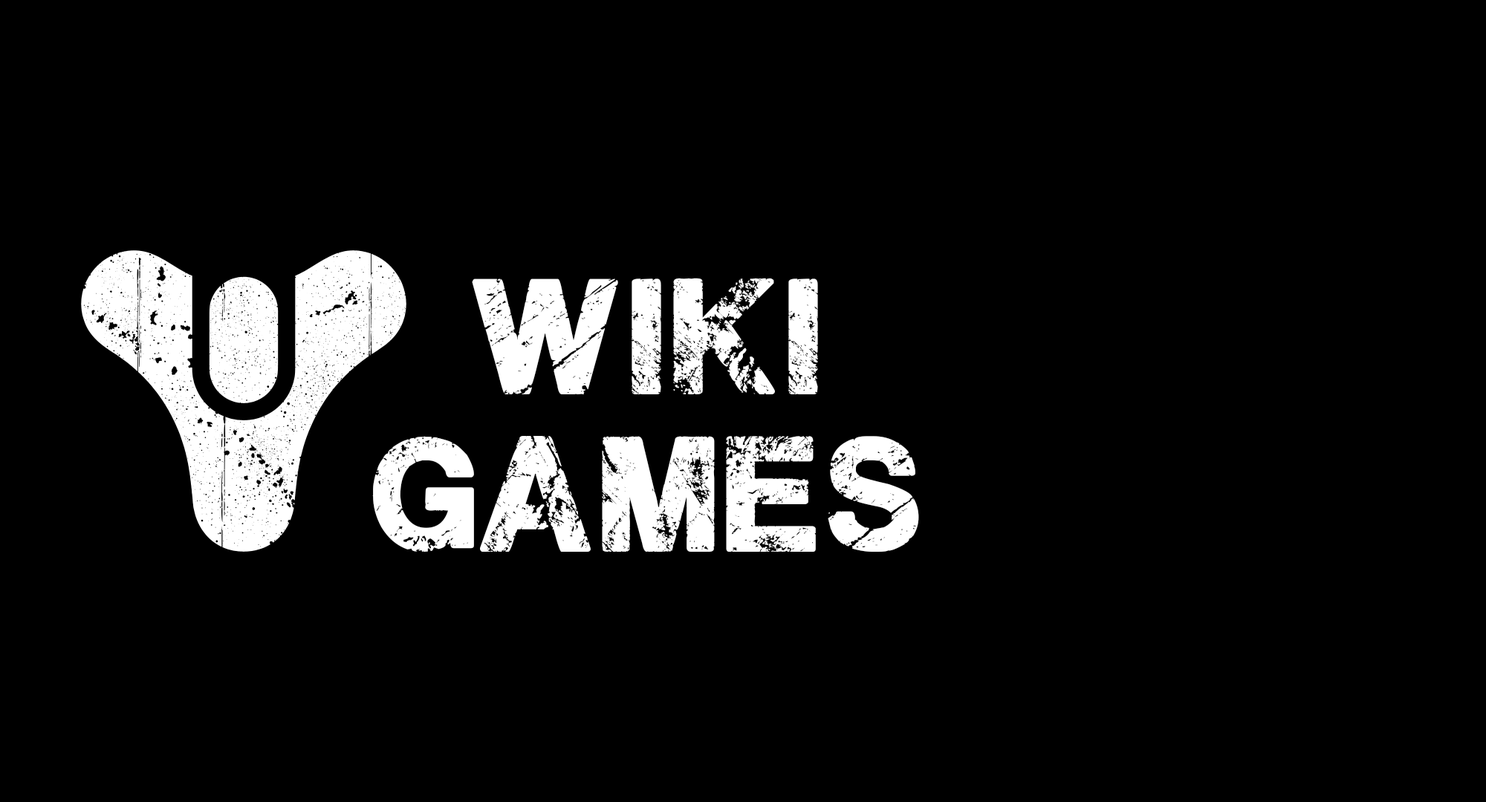
<style>
.page{position:relative;width:1486px;height:802px;background:#000000}
.page>*{position:absolute;margin:0}
.t1{font:131.5px "PlaneCrash";color:#ffffff}
</style>
<div class="page">
<p class="t1" style="left:372px;top:278px;width:547px;height:274px;text-align:center">wiki<br>games</p>
</div>
